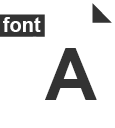
<style>
.page{position:relative;width:115px;height:128px;background:#ffffff}
.page>*{position:absolute;margin:0}
.t1{font:20px "Arial-BoldMT";letter-spacing:0.002em;color:#ffffff}
.t2{font:72px "Arial-BoldMT";letter-spacing:0.002em;color:#333333}
</style>
<div class="page">
<p class="t1" style="left:3px;top:17px;width:38px;height:15px">font</p>
<p class="t2" style="left:45px;top:48px;width:52px;height:52px">A</p>
</div>
